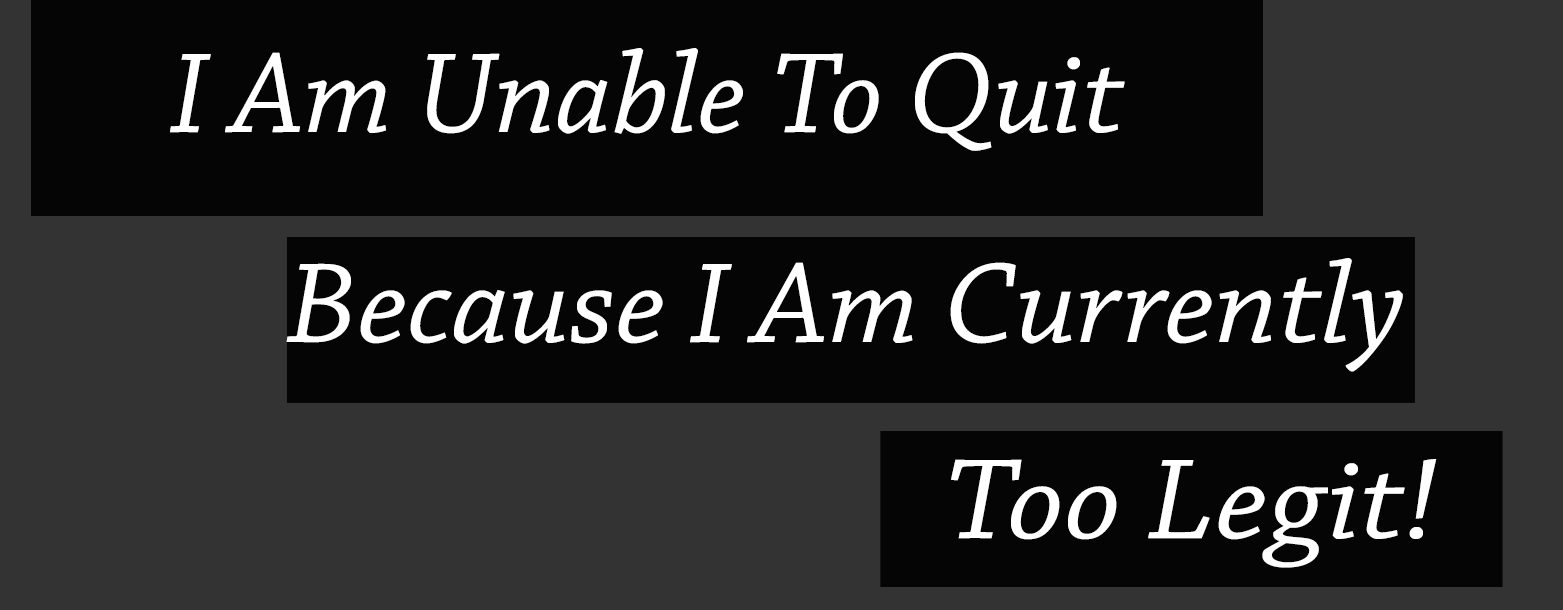
<style>
.page{position:relative;width:1563px;height:610px;background:#050505}
.page>*{position:absolute;margin:0}
.t1{font:120px "ChaparralPro-Italic";color:#ffffff}
.t2{font:119.9px "ChaparralPro-Italic";color:#ffffff}
.t3{font:120px "ChaparralPro-Italic";color:#ffffff;scale:1.07 1}
</style>
<div class="page">
<p class="t1" style="left:170px;top:48px;width:955px;height:103px">I Am Unable To Quit</p>
<p class="t2" style="left:286px;top:258px;width:1117px;height:114px">Because I Am Currently</p>
<p class="t3" style="left:951px;top:459px;width:486px;height:109px">Too Legit!</p>
</div>
